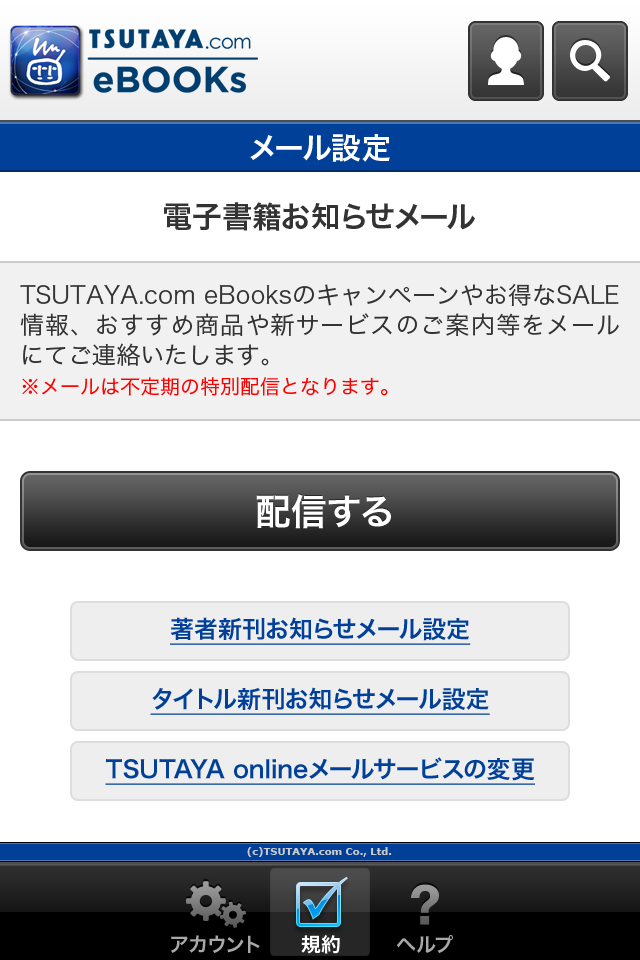
<style>
.page{position:relative;width:640px;height:960px;background:#ffffff}
.page>*{position:absolute;margin:0}
.t1{font:30px "HiraKakuPro-W6";color:#ffffff}
.t2{font:30px "HiraKakuPro-W6";color:#333333}
.t3{font:24px/30px "HiraKakuPro-W3";color:#333333}
.t4{font:20px/30px "HiraKakuPro-W3";color:#ff0000}
.t5{font:36px "HiraKakuPro-W6";color:#ffffff}
.t6{font:24px "HiraKakuPro-W6";color:#004098;text-decoration:underline}
.t7{font:10px "Verdana-Bold";color:#cccccc}
.t8{font:20px "HiraKakuPro-W6";color:#a8a8a8}
.t9{font:20px "HiraKakuPro-W6";color:#ffffff}
</style>
<div class="page">
<p class="t1" style="left:250px;top:134px;width:140px;height:28px">メール設定</p>
<p class="t2" style="left:163px;top:202px;width:312px;height:29px">電子書籍お知らせメール</p>
<p class="t3" style="left:20px;top:283px;width:599px;height:113px;text-align:justify">TSUTAYA.com eBooksのキャンペーンやお得なSALE情報、おすすめ商品や新サービスのご案内等をメールにてご連絡いたします。<br><span class="t4">※メールは不定期の特別配信となります。</span></p>
<p class="t5" style="left:256px;top:494px;width:135px;height:35px">配信する</p>
<p class="t6" style="left:170px;top:617px;width:301px;height:28px">著者新刊お知らせメール設定</p>
<p class="t6" style="left:150px;top:687px;width:340px;height:28px">タイトル新刊お知らせメール設定</p>
<p class="t6" style="left:105px;top:757px;width:430px;height:28px">TSUTAYA onlineメールサービスの変更</p>
<p class="t7" style="left:247px;top:847px;width:145px;height:10px">(c)TSUTAYA.com Co., Ltd.</p>
<p class="t8" style="left:170px;top:935px;width:90px;height:18px">アカウント</p>
<p class="t9" style="left:301px;top:935px;width:39px;height:19px">規約</p>
<p class="t8" style="left:396px;top:935px;width:57px;height:19px">ヘルプ</p>
</div>
